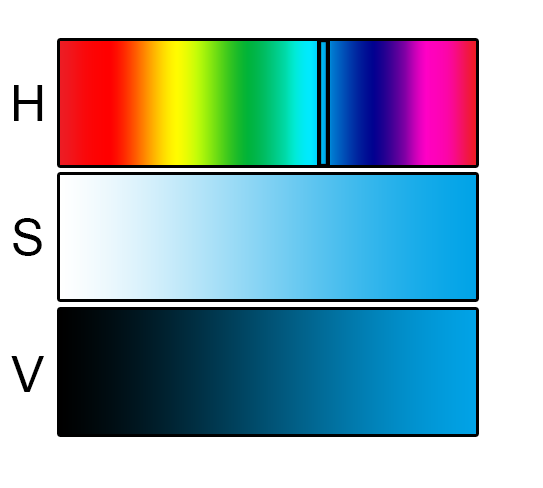
<style>
.page{position:relative;width:543px;height:488px;background:#ffffff}
.page>*{position:absolute;margin:0}
.t1{font:12px "ArialMT";color:#000000}
</style>
<div class="page">
<p class="t1" style="left:14px;top:85px;width:29px;height:36px">H</p>
<p class="t1" style="left:13px;top:218px;width:29px;height:38px">S</p>
<p class="t1" style="left:11px;top:356px;width:33px;height:36px">V</p>
</div>
